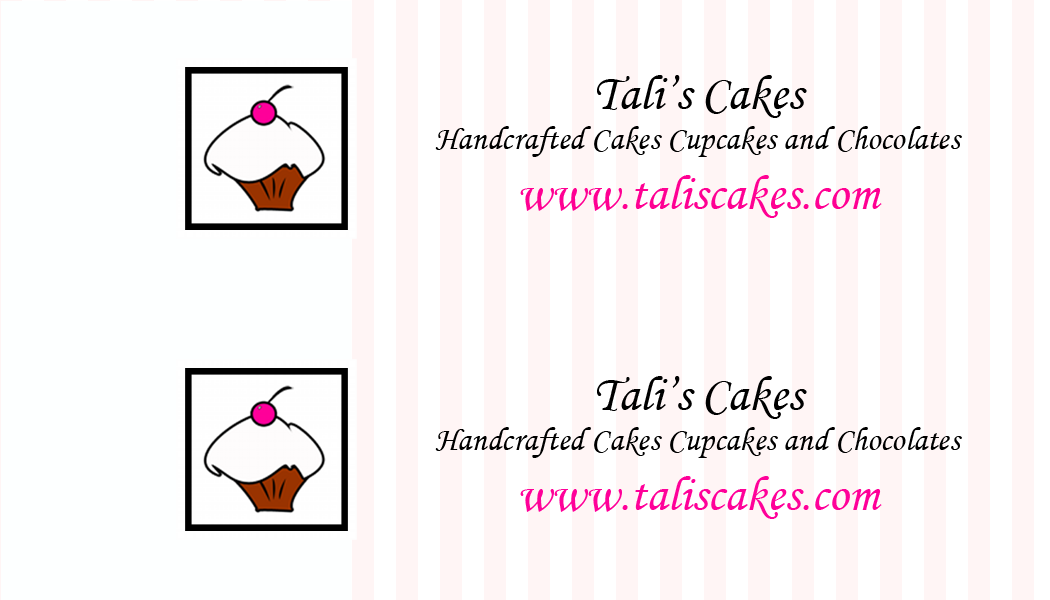
<style>
.page{position:relative;width:1050px;height:600px;background:#ffffff}
.page>*{position:absolute;margin:0}
.t1{font:33.3px "MonotypeCorsiva";color:#000000}
.t2{font:50px "MonotypeCorsiva";color:#000000}
.t3{font:50px "MonotypeCorsiva";color:#ff0093}
.t4{font:50px "MonotypeCorsiva";color:#ff0099}
</style>
<div class="page">
<p class="t1" style="left:435px;top:75px;width:527px;height:143px;text-align:center"><span class="t2">Tali’s Cakes<br></span>Handcrafted Cakes Cupcakes and Chocolates<br><span class="t3">www.taliscakes.com</span></p>
<p class="t1" style="left:435px;top:376px;width:527px;height:143px;text-align:center"><span class="t2">Tali’s Cakes<br></span>Handcrafted Cakes Cupcakes and Chocolates<br><span class="t4">www.taliscakes.com</span></p>
</div>
